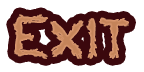
<style>
.page{position:relative;width:144px;height:72px;background:#ffffff}
.page>*{position:absolute;margin:0}
.t1{font:56px "TOBACCO";color:#c4845a;font-weight:bold}
</style>
<div class="page">
<p class="t1" style="left:13px;top:14px;width:116px;height:45px">EXIT</p>
</div>
